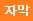
<style>
.page{position:relative;width:33px;height:21px;background:#ff7d1d}
.page>*{position:absolute;margin:0}
.t1{font:12px "Dotum";color:#ffffff;font-weight:bold}
</style>
<div class="page">
<p class="t1" style="left:5px;top:5px;width:25px;height:11px">자막</p>
</div>
